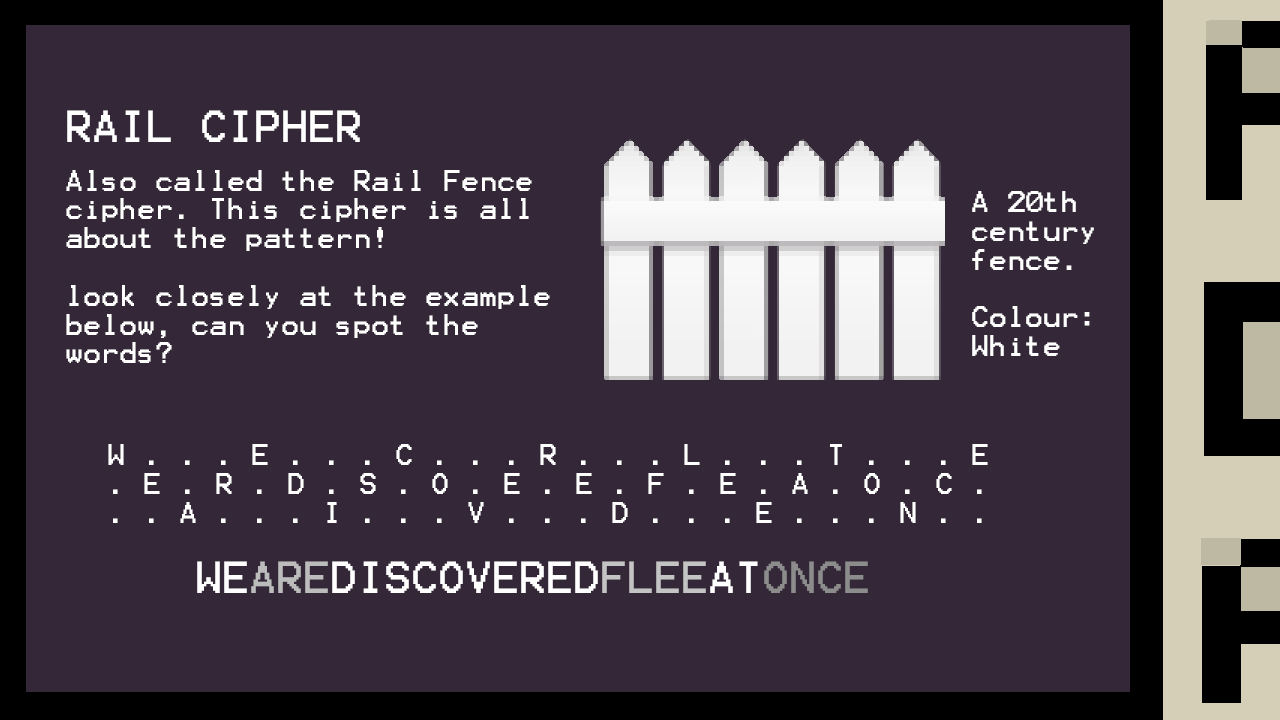
<style>
.page{position:relative;width:1280px;height:720px;background:#342838}
.page>*{position:absolute;margin:0}
.t1{font:36px "Terminal";color:#ffffff}
.t2{font:24px "Terminal";color:#ffffff}
.t3{font:36px "Terminal";color:#bcbcbc}
.t4{font:36px "Terminal";color:#c4c4c4}
.t5{font:36px "Terminal";color:#8c8c8c}
</style>
<div class="page">
<p class="t1" style="left:67px;top:110px;width:293px;height:32px">RAIL CIPHER</p>
<p class="t2" style="left:66px;top:170px;width:484px;height:193px">Also called the Rail Fence cipher. This cipher is all about the pattern!<br><br>look closely at the example below, can you spot the words?</p>
<p class="t2" style="left:972px;top:191px;width:122px;height:165px">A 20th century<br>fence.<br><br>Colour:<br>White</p>
<p class="t2" style="left:108px;top:444px;width:880px;height:79px">W . . . E . . . C . . . R . . . L . . . T . . . E<br>. E . R . D . S . O . E . E . F . E . A . O . C .<br>. . A . . . I . . . V . . . D . . . E . . . N . .</p>
<p class="t1" style="left:197px;top:561px;width:671px;height:32px">WE<span class="t3">ARE</span>DISCOVERED<span class="t4">FLEE</span>AT<span class="t5">ONCE</span></p>
</div>
